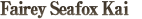
<style>
.page{position:relative;width:142px;height:19px;background:#ffffff}
.page>*{position:absolute;margin:0}
.t1{font:18px "RyuminPro-ExBold";letter-spacing:-0.08em;color:#4a3f32;font-weight:bold;scale:0.9 1}
</style>
<div class="page">
<p class="t1" style="left:0px;top:1px;width:129px;height:18px">Fairey Seafox Kai</p>
</div>
